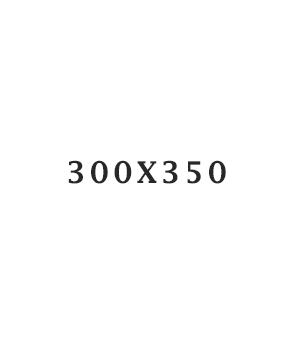
<style>
.page{position:relative;width:300px;height:350px;background:#ffffff}
.page>*{position:absolute;margin:0}
.t1{font:30px "LucidaFax-Demi";letter-spacing:0.12em;color:#282828;text-transform:uppercase}
</style>
<div class="page">
<p class="t1" style="left:68px;top:160px;width:158px;height:24px">300x350</p>
</div>
